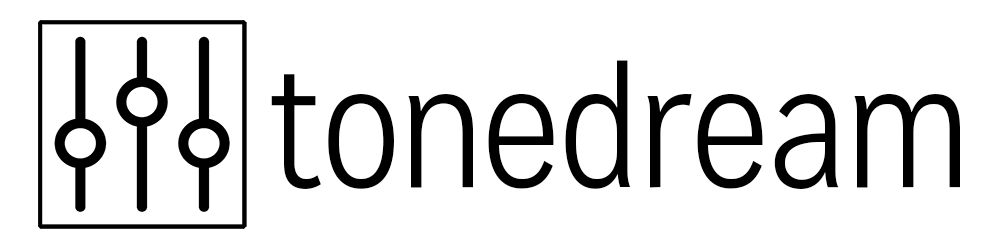
<style>
.page{position:relative;width:1000px;height:250px;background:#ffffff}
.page>*{position:absolute;margin:0}
.t1{font:173.6px "MissionGothic-Light";letter-spacing:-0.025em;color:#000000}
</style>
<div class="page">
<p class="t1" style="left:271px;top:60px;width:689px;height:129px">tonedream</p>
</div>
